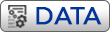
<style>
.page{position:relative;width:110px;height:32px}
.page>*{position:absolute;margin:0}
.t1{font:24px "Avenir-Roman";color:#003699;font-weight:bold;scale:1.06 1}
</style>
<div class="page">
<p class="t1" style="left:36px;top:7px;width:66px;height:18px">DATA</p>
</div>
